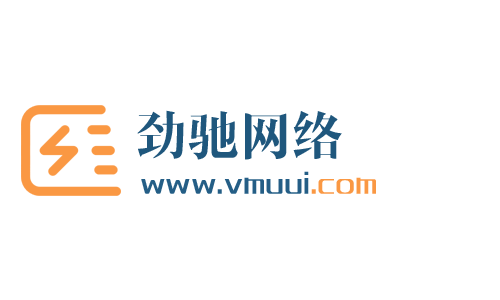
<style>
.page{position:relative;width:500px;height:300px;background:#ffffff}
.page>*{position:absolute;margin:0}
.t1{font:52px "MFShangYa_Noncommercial-Regular";color:#1f577d}
.t2{font:25px "MFLangQian_Noncommercial-Regular";color:#245e86}
.t3{font:25px "MFLangQian_Noncommercial-Regular";color:#fa9843}
</style>
<div class="page">
<p class="t1" style="left:137px;top:110px;width:205px;height:50px">劲驰网络</p>
<p class="t2" style="left:141px;top:171px;width:235px;height:23px">www.vmuui<span class="t3">.com</span></p>
</div>
